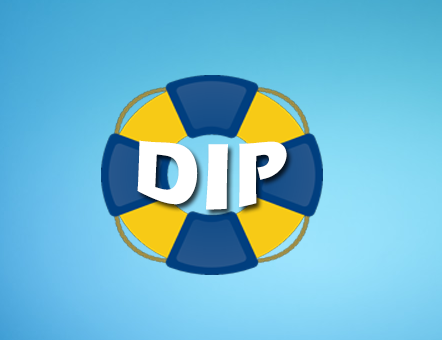
<style>
.page{position:relative;width:442px;height:340px}
.page>*{position:absolute;margin:0}
.t1{font:72.2px "ErasITC-Bold";letter-spacing:0.025em;color:#ffffff;scale:1.18 1}
</style>
<div class="page">
<p class="t1" style="left:137px;top:140px;width:150px;height:70px">DIP</p>
</div>
